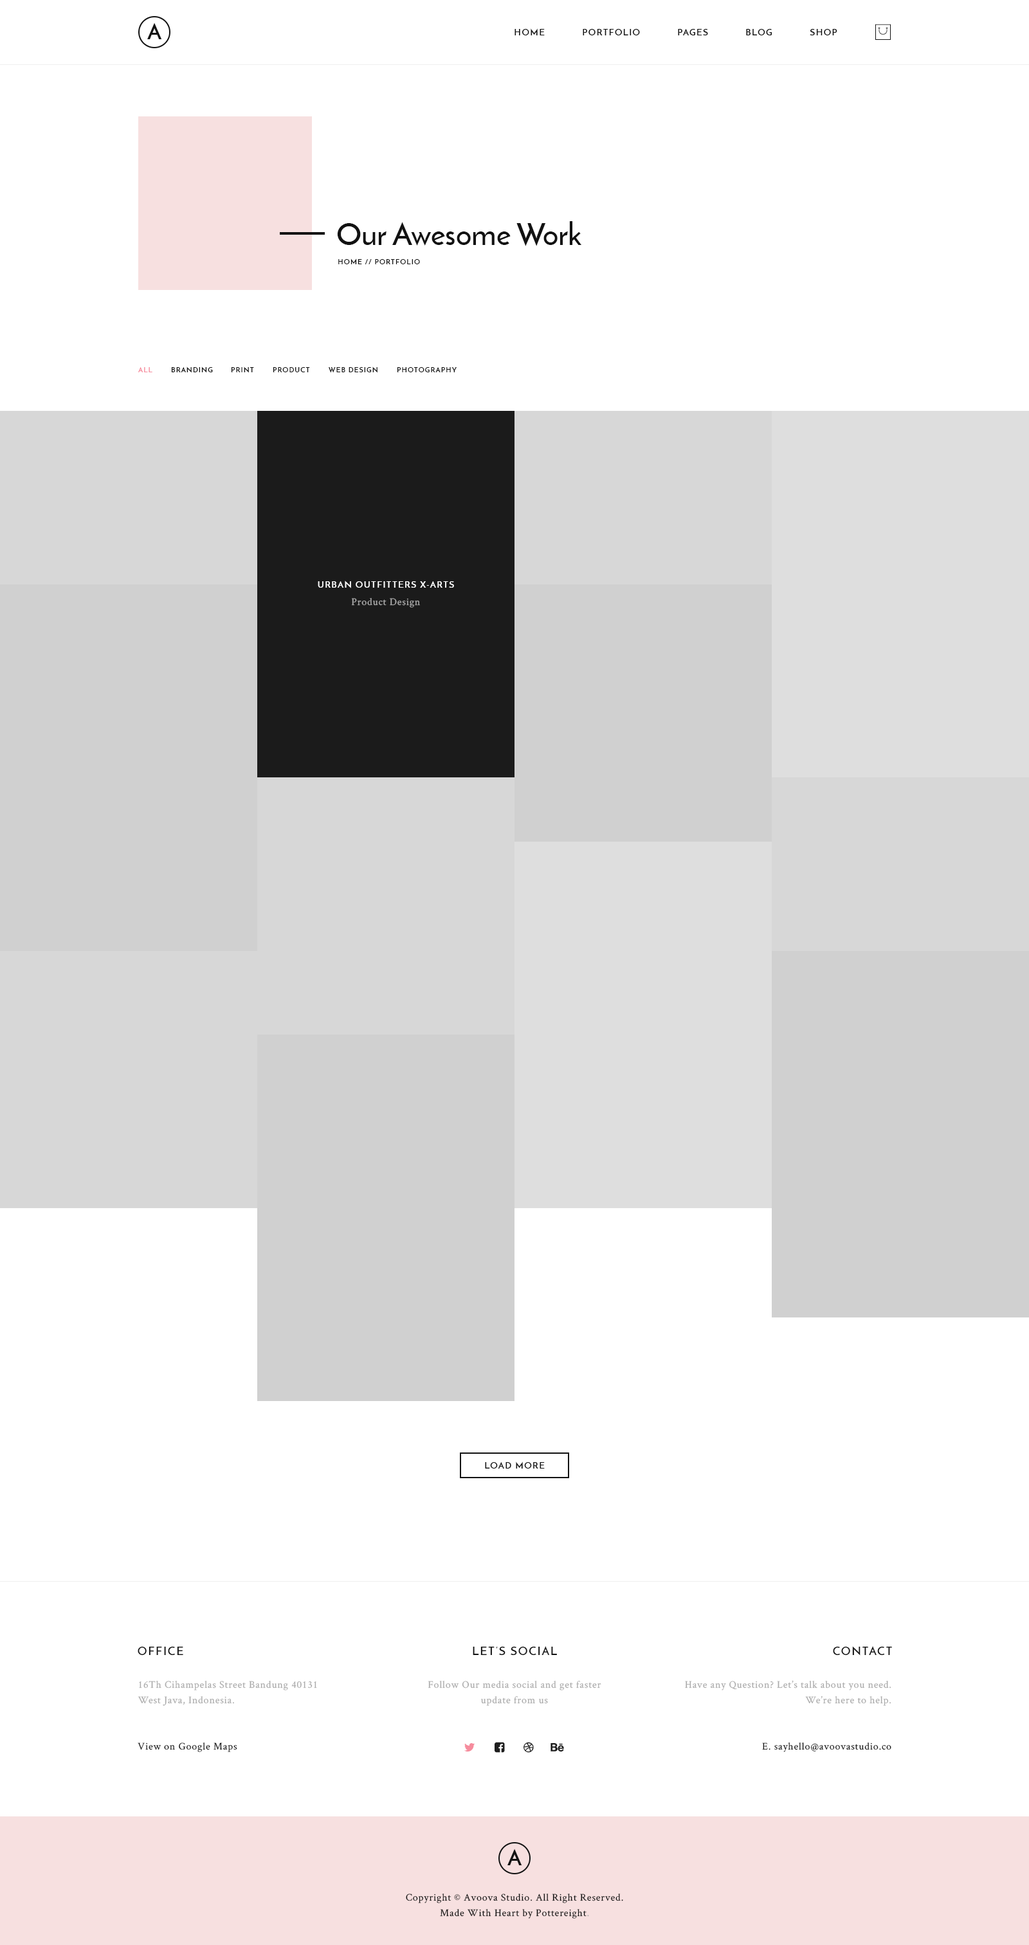
<style>
.page{position:relative;width:1029px;height:1945px;background:#ffffff}
.page>*{position:absolute;margin:0}
.t1{font:21.9px "JosefinSans-Bold";letter-spacing:0.5em;color:#121212;text-transform:uppercase}
.t2{font:9px "JosefinSans-SemiBold";letter-spacing:0.1em;color:#121212;text-transform:uppercase}
.t3{font:30.9px "JosefinSans-SemiBold";color:#121212}
.t4{font:7.1px "JosefinSans-SemiBold";letter-spacing:0.1em;color:#121212;text-transform:uppercase}
.t5{font:7.1px "JosefinSans-SemiBold";letter-spacing:0.1em;color:#f68c9d;text-transform:uppercase}
.t6{font:9px "JosefinSans-SemiBold";letter-spacing:0.1em;color:#ffffff;text-transform:uppercase}
.t7{font:10.3px "CrimsonText-Roman";letter-spacing:0.05em;color:#ababab}
.t8{font:11.6px "JosefinSans-SemiBold";letter-spacing:0.1em;color:#121212;text-transform:uppercase}
.t9{font:10.3px/15.4px "CrimsonText-Roman";letter-spacing:0.05em;color:#ababab}
.t10{font:10.3px "CrimsonText-Roman";letter-spacing:0.05em;color:#121212}
.t11{font:10.3px/15.4px "CrimsonText-Roman";letter-spacing:0.05em;color:#121212}
</style>
<div class="page">
<p class="t1" style="left:147px;top:22px;width:15px;height:17px">a</p>
<p class="t2" style="left:514px;top:28px;width:30px;height:7px">Home</p>
<p class="t2" style="left:582px;top:29px;width:58px;height:6px">Portfolio</p>
<p class="t2" style="left:678px;top:29px;width:30px;height:6px">Pages</p>
<p class="t2" style="left:746px;top:29px;width:25px;height:6px">Blog</p>
<p class="t2" style="left:809px;top:29px;width:28px;height:6px">Shop</p>
<p class="t3" style="left:337px;top:221px;width:244px;height:25px">Our Awesome Work</p>
<p class="t4" style="left:338px;top:258px;width:82px;height:6px">Home // Portfolio</p>
<p class="t5" style="left:138px;top:367px;width:14px;height:5px">All</p>
<p class="t4" style="left:171px;top:366px;width:42px;height:7px">Branding</p>
<p class="t4" style="left:231px;top:366px;width:23px;height:7px">Print</p>
<p class="t4" style="left:273px;top:367px;width:37px;height:5px">Product</p>
<p class="t4" style="left:328px;top:366px;width:49px;height:7px">Web Design</p>
<p class="t4" style="left:397px;top:367px;width:59px;height:5px">Photography</p>
<p class="t6" style="left:318px;top:580px;width:136px;height:8px">Urban Outfitters X-Arts</p>
<p class="t7" style="left:351px;top:598px;width:69px;height:10px">Product Design</p>
<p class="t2" style="left:485px;top:1461px;width:59px;height:7px">Load more</p>
<p class="t8" style="left:138px;top:1646px;width:45px;height:9px">Office</p>
<p class="t8" style="left:473px;top:1646px;width:84px;height:9px">Let’s Social</p>
<p class="t8" style="left:833px;top:1646px;width:59px;height:9px">Contact</p>
<p class="t9" style="left:138px;top:1680px;width:179px;height:26px">16Th Cihampelas Street Bandung 40131<br>West Java, Indonesia.</p>
<p class="t9" style="left:428px;top:1680px;width:173px;height:26px;text-align:center">Follow Our media social and get faster<br>update from us</p>
<p class="t9" style="left:685px;top:1680px;width:206px;height:26px;text-align:right">Have any Question? Let’s talk about you need.<br>We’re here to help.</p>
<p class="t10" style="left:138px;top:1742px;width:99px;height:10px">View on Google Maps</p>
<p class="t10" style="left:762px;top:1742px;width:129px;height:10px">E. sayhello@avoovastudio.co</p>
<p class="t1" style="left:507px;top:1848px;width:15px;height:17px">a</p>
<p class="t11" style="left:406px;top:1893px;width:217px;height:25px;text-align:center">Copyright © Avoova Studio. All Right Reserved.<br>Made With Heart by Pottereight<span class="t9">.</span></p>
</div>
